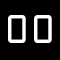
<style>
.page{position:relative;width:60px;height:60px;background:#000000}
.page>*{position:absolute;margin:0}
.t1{font:36px "OCRAStd";color:#ffffff}
</style>
<div class="page">
<p class="t1" style="left:8px;top:15px;width:44px;height:28px">00</p>
</div>
